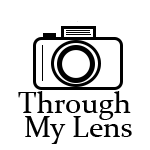
<style>
.page{position:relative;width:150px;height:150px;background:#ffffff}
.page>*{position:absolute;margin:0}
.t1{font:30px/24px "Constantia";color:#000000}
</style>
<div class="page">
<p class="t1" style="left:18px;top:91px;width:114px;height:53px;text-align:center">Through <br>My Lens</p>
</div>
